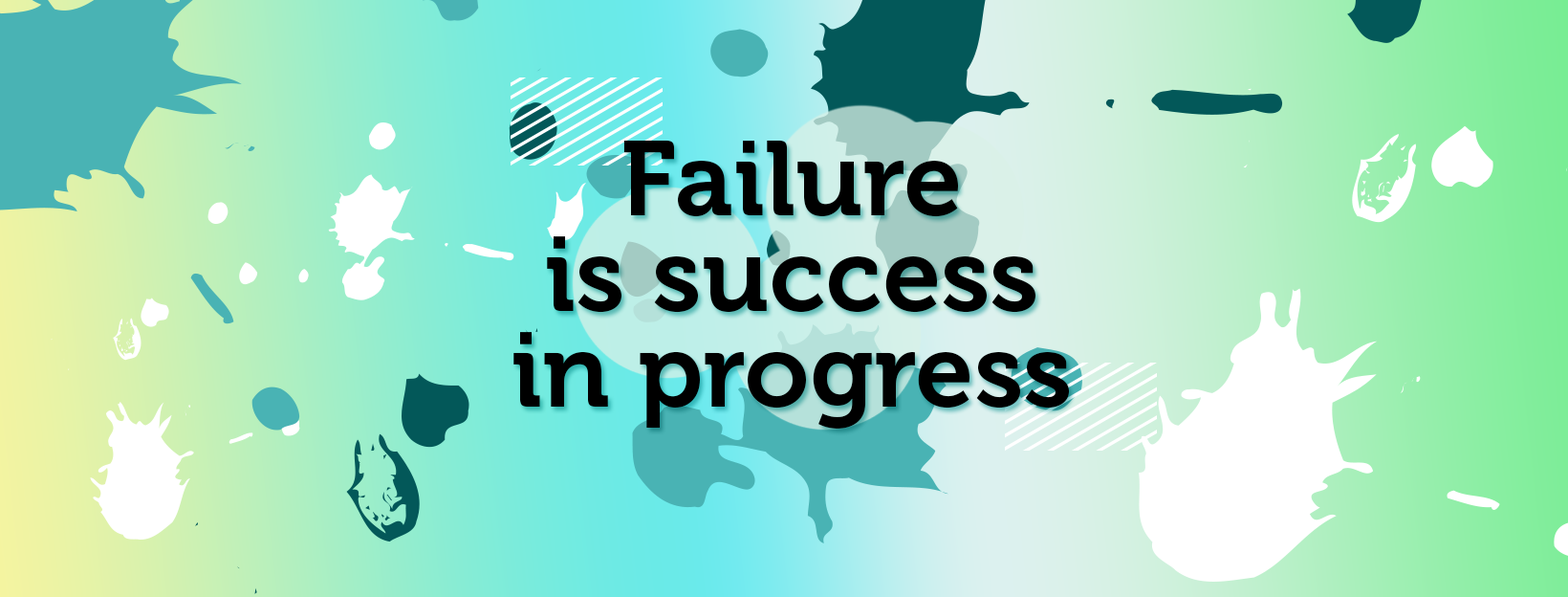
<style>
.page{position:relative;width:1568px;height:597px}
.page>*{position:absolute;margin:0}
.t1{font:105.2px/95.6px "Museo-700";color:#000000}
</style>
<div class="page">
<p class="t1" style="left:513px;top:140px;width:556px;height:288px;text-align:center">Failure<br> is success <br>in progress</p>
</div>
